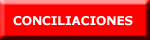
<style>
.page{position:relative;width:150px;height:40px;background:#ff0000}
.page>*{position:absolute;margin:0}
.t1{font:12px "Verdana-Bold";color:#ffffff}
</style>
<div class="page">
<p class="t1" style="left:13px;top:16px;width:120px;height:10px">CONCILIACIONES</p>
</div>
